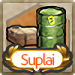
<style>
.page{position:relative;width:75px;height:75px}
.page>*{position:absolute;margin:0}
.t1{font:16px "AdobeClean-Regular";letter-spacing:-0.08em;color:#ff5a00}
</style>
<div class="page">
<p class="t1" style="left:21px;top:53px;width:34px;height:16px">Suplai</p>
</div>
